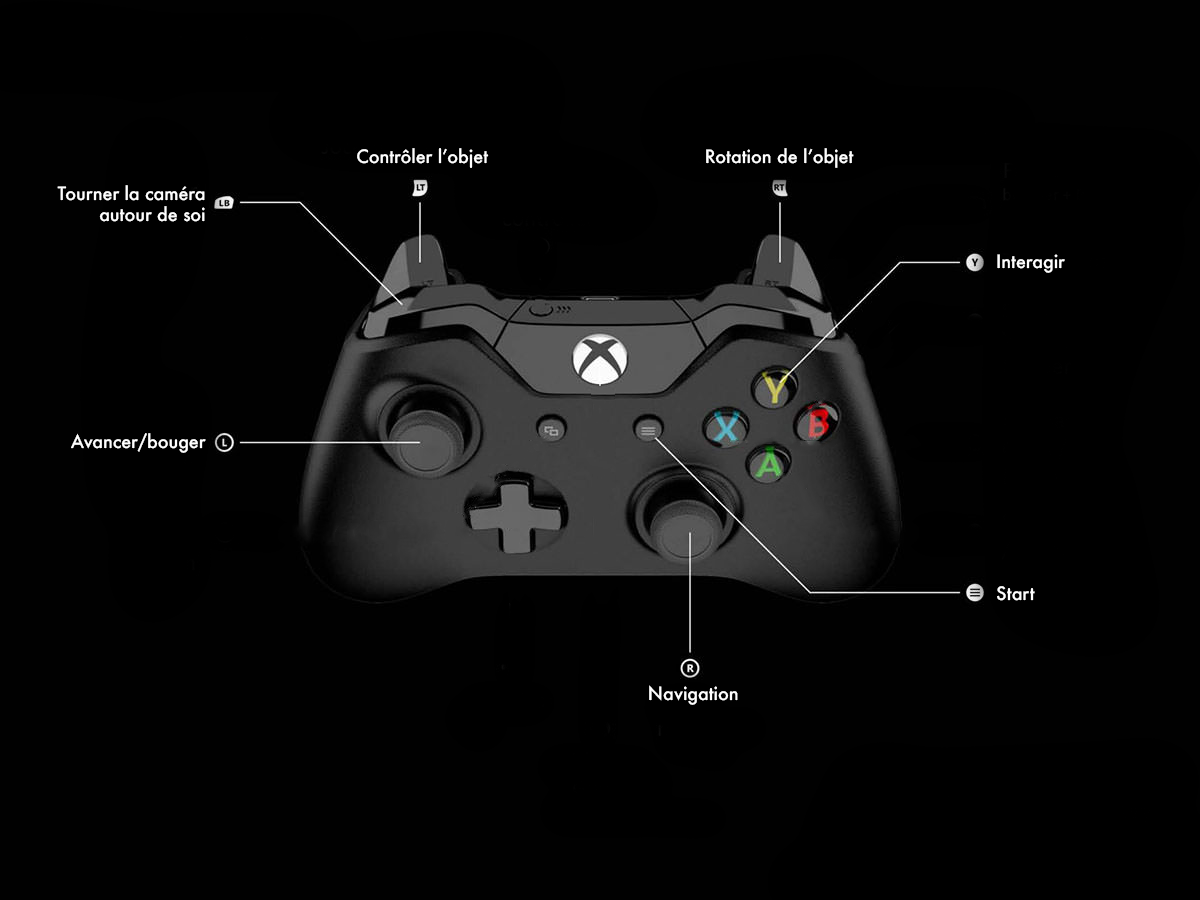
<style>
.page{position:relative;width:1200px;height:900px;background:#010101}
.page>*{position:absolute;margin:0}
.t1{font:18px "Futura-Medium";letter-spacing:-0.005em;color:#fefefe}
</style>
<div class="page">
<p class="t1" style="left:357px;top:148px;width:132px;height:20px">Contrôler l’objet</p>
<p class="t1" style="left:706px;top:148px;width:148px;height:20px">Rotation de l’objet</p>
<p class="t1" style="left:57px;top:185px;width:148px;height:37px;text-align:right">Tourner la caméra <br>autour de soi</p>
<p class="t1" style="left:997px;top:254px;width:68px;height:19px">Interagir</p>
<p class="t1" style="left:71px;top:433px;width:135px;height:20px">Avancer/bouger</p>
<p class="t1" style="left:997px;top:586px;width:38px;height:15px">Start</p>
<p class="t1" style="left:649px;top:685px;width:89px;height:20px">Navigation</p>
</div>
